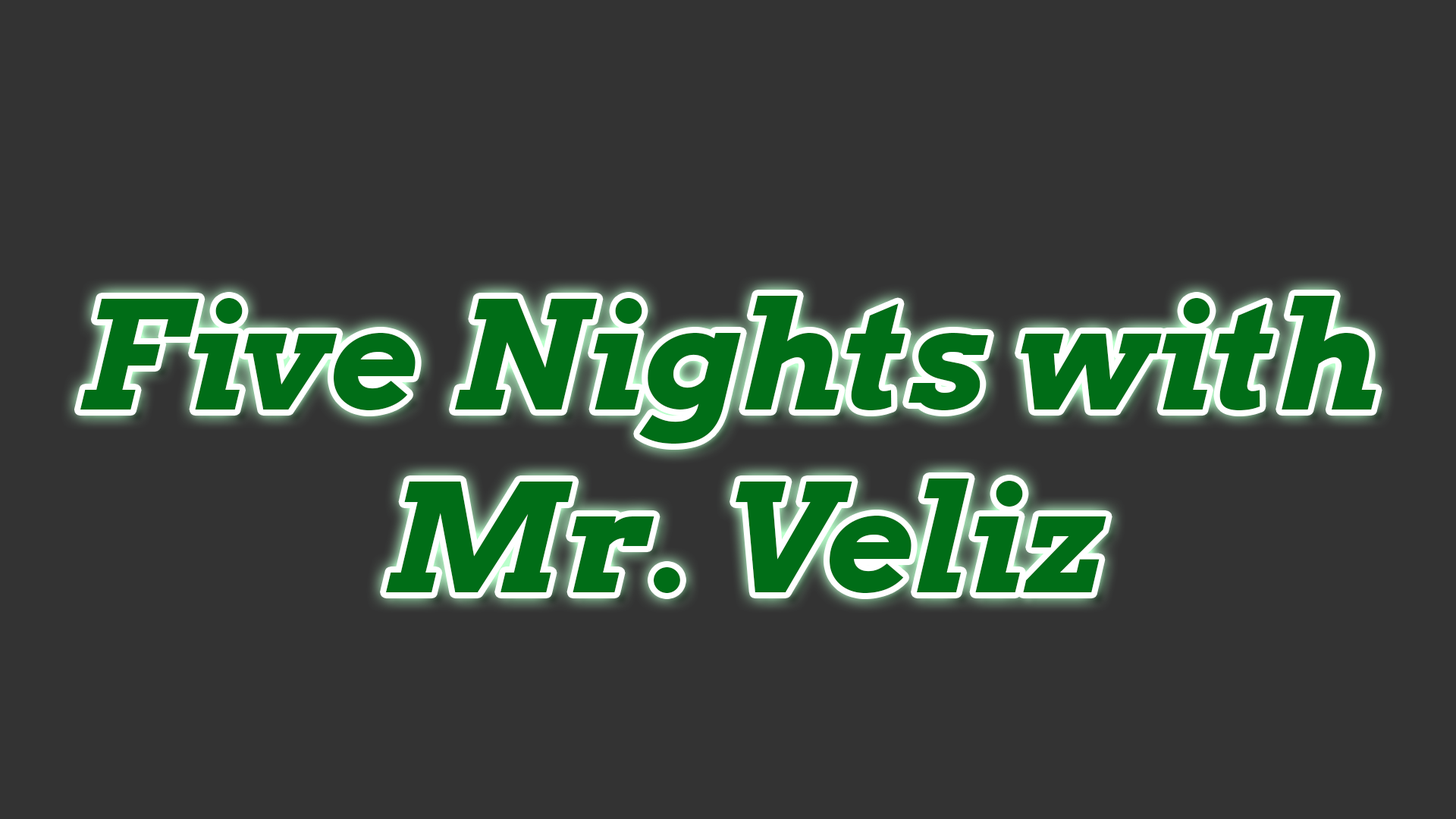
<style>
.page{position:relative;width:1456px;height:819px;background:#333333}
.page>*{position:absolute;margin:0}
.t1{font:149.4px "Arvo-BoldItalic";color:#006d17}
</style>
<div class="page">
<p class="t1" style="left:80px;top:296px;width:1296px;height:297px;text-align:center">Five Nights with <br>Mr. Veliz</p>
</div>
